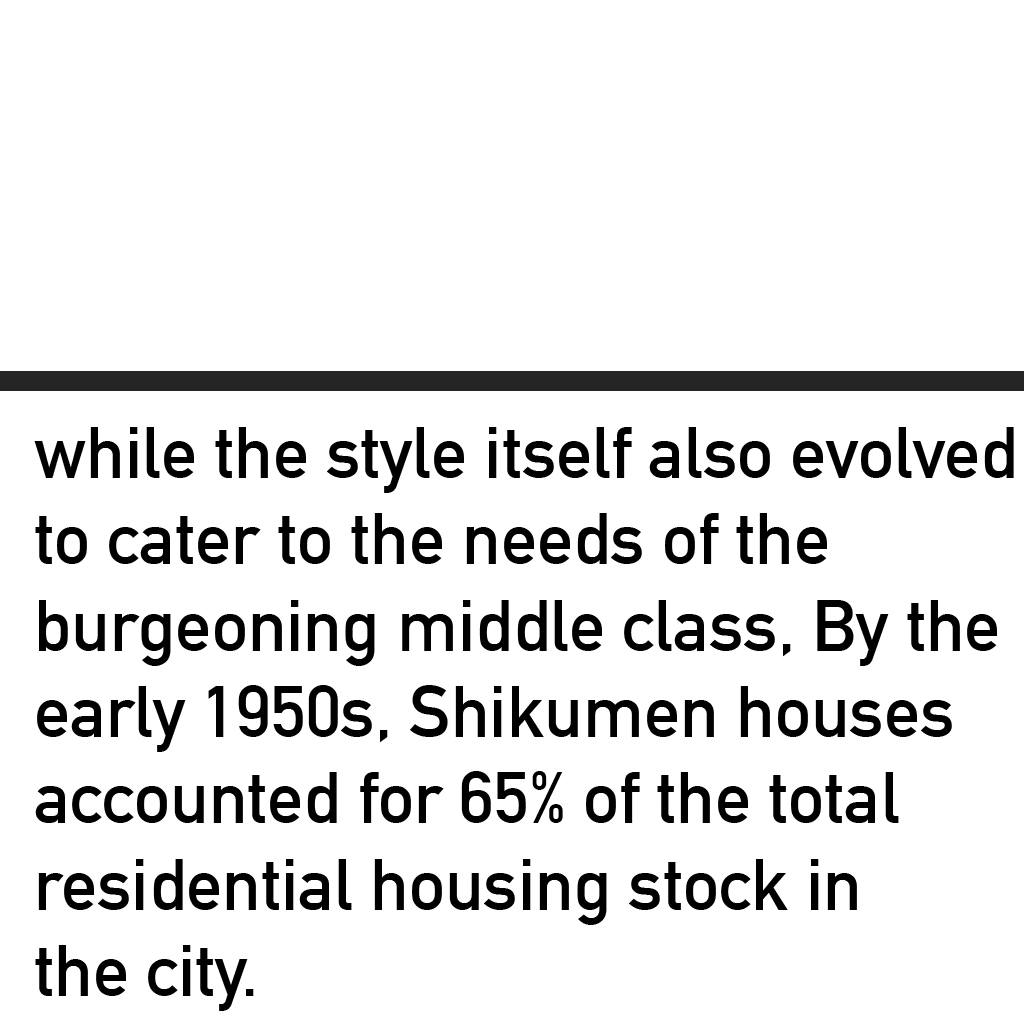
<style>
.page{position:relative;width:1024px;height:1024px;background:#ffffff}
.page>*{position:absolute;margin:0}
.t1{font:72px "DINAlternate-Bold";color:#000000}
</style>
<div class="page">
<p class="t1" style="left:34px;top:427px;width:980px;height:584px">while the style itself also evolved <br>to cater to the needs of the <br>burgeoning middle class, By the<br>early 1950s, Shikumen houses<br>accounted for 65% of the total <br>residential housing stock in <br>the city.</p>
</div>
